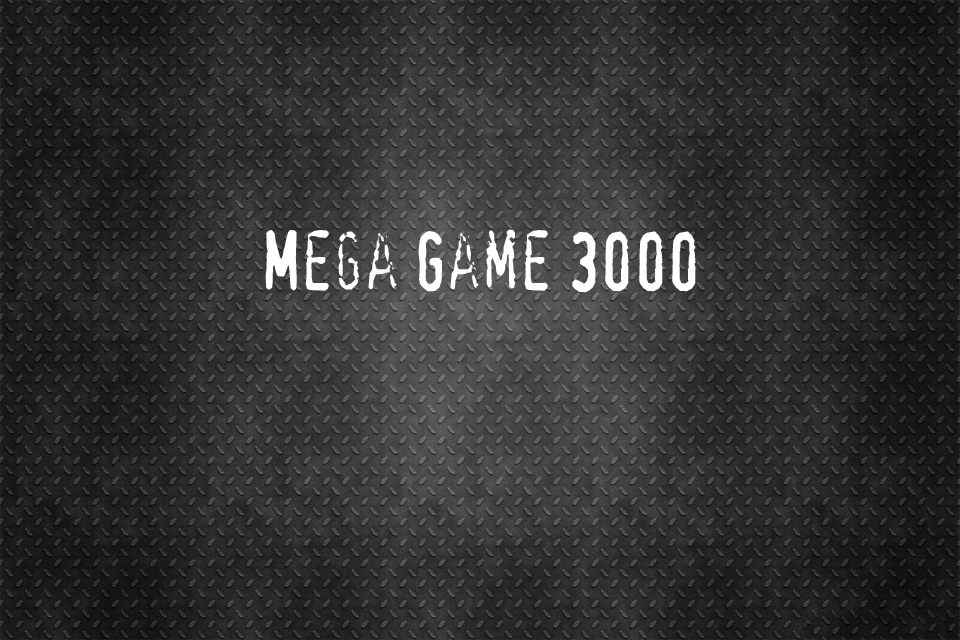
<style>
.page{position:relative;width:960px;height:640px}
.page>*{position:absolute;margin:0}
.t1{font:79.2px "Confidential";letter-spacing:-0.01em;color:#ffffff;scale:0.91 1}
</style>
<div class="page">
<p class="t1" style="left:265px;top:229px;width:431px;height:64px">Mega Game 3000</p>
</div>
